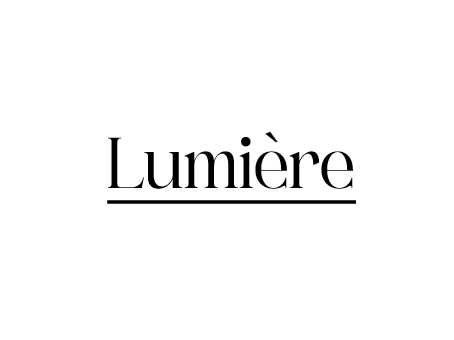
<style>
.page{position:relative;width:454px;height:340px;background:#ffffff}
.page>*{position:absolute;margin:0}
.t1{font:72px "MELADUROSE";letter-spacing:0.01em;color:#000000;text-decoration:underline}
</style>
<div class="page">
<p class="t1" style="left:107px;top:131px;width:249px;height:73px">Lumière</p>
</div>
